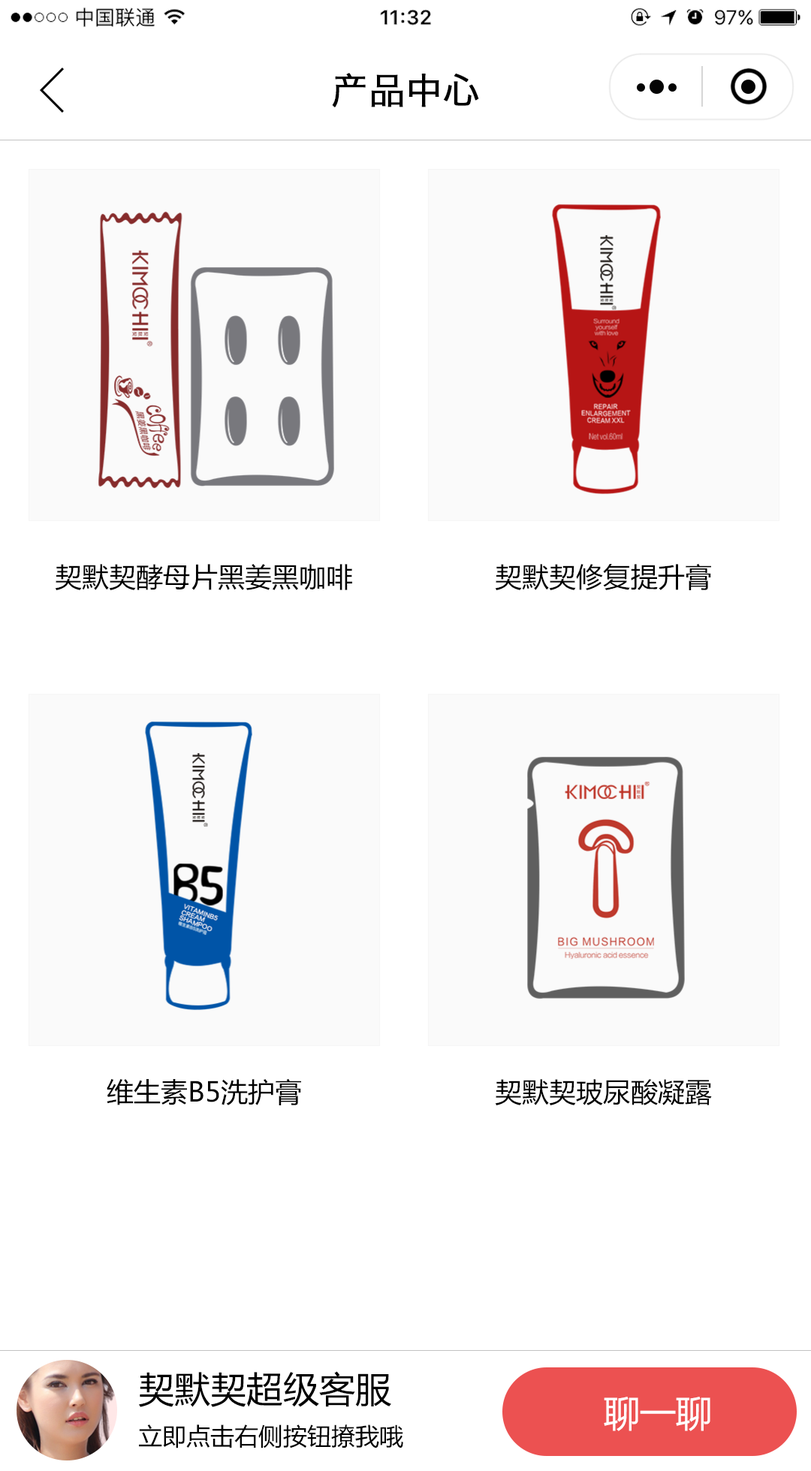
<style>
.page{position:relative;width:811px;height:1471px;background:#ffffff}
.page>*{position:absolute;margin:0}
.t1{font:36px "HiraginoSansGB-W3";color:#000000;font-weight:bold}
.t2{font:27px "MicrosoftYaHei";color:#000000}
.t3{font:36px "MicrosoftYaHei";color:#000000}
.t4{font:36px "MicrosoftYaHei";color:#ffffff}
.t5{font:24px "MicrosoftYaHei";color:#000000}
</style>
<div class="page">
<p class="t1" style="left:332px;top:73px;width:147px;height:34px">产品中心</p>
<p class="t2" style="left:55px;top:564px;width:297px;height:26px">契默契酵母片黑姜黑咖啡</p>
<p class="t2" style="left:495px;top:563px;width:216px;height:27px">契默契修复提升膏</p>
<p class="t2" style="left:107px;top:1078px;width:194px;height:27px">维生素B5洗护膏</p>
<p class="t2" style="left:495px;top:1079px;width:217px;height:26px">契默契玻尿酸凝露</p>
<p class="t3" style="left:138px;top:1371px;width:253px;height:36px">契默契超级客服</p>
<p class="t4" style="left:604px;top:1396px;width:106px;height:35px">聊一聊</p>
<p class="t5" style="left:139px;top:1424px;width:264px;height:24px">立即点击右侧按钮撩我哦</p>
</div>
